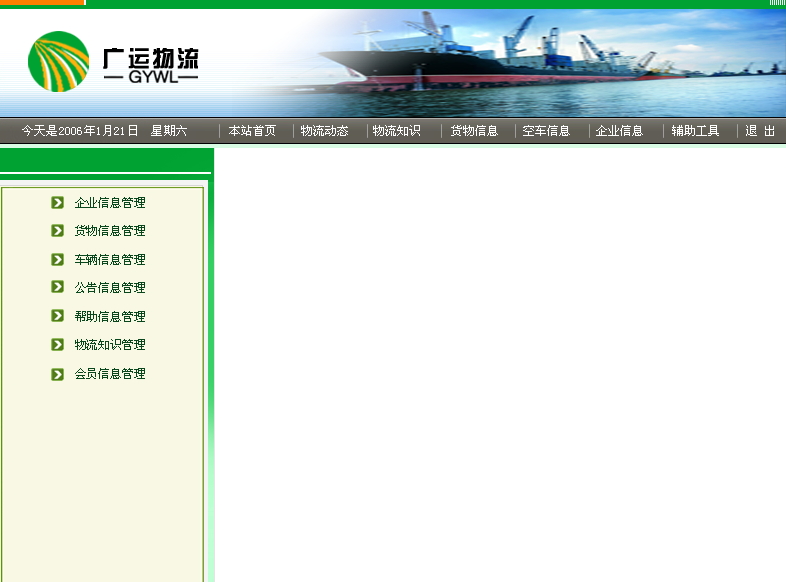
<style>
.page{position:relative;width:786px;height:582px;background:#ffffff}
.page>*{position:absolute;margin:0}
.t1{font:12px "SimSun";letter-spacing:0.02em;color:#ffffff}
.t2{font:12px "SimSun";color:#ffffff}
.t3{font:12px/28.5px "SimSun";letter-spacing:-0.02em;color:#07471b}
</style>
<div class="page">
<p class="t1" style="left:22px;top:125px;width:165px;height:11px">今天是2006年1月21日  星期六</p>
<p class="t2" style="left:229px;top:125px;width:545px;height:11px">本站首页    物流动态　　物流知识     货物信息    空车信息    企业信息     辅助工具    退 出</p>
<p class="t3" style="left:75px;top:197px;width:70px;height:182px">企业信息管理<br>货物信息管理<br>车辆信息管理<br>公告信息管理<br>帮助信息管理<br>物流知识管理<br>会员信息管理</p>
</div>
